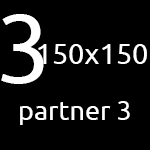
<style>
.page{position:relative;width:150px;height:150px;background:#000000}
.page>*{position:absolute;margin:0}
.t1{font:97px "Ubuntu";color:#ffffff}
.t2{font:29px "Ubuntu";color:#ffffff}
.t3{font:27px "Ubuntu";color:#ffffff}
</style>
<div class="page">
<p class="t1" style="left:1px;top:14px;width:43px;height:70px">3</p>
<p class="t2" style="left:38px;top:44px;width:109px;height:20px">150x150</p>
<p class="t3" style="left:20px;top:101px;width:110px;height:24px">partner 3</p>
</div>
